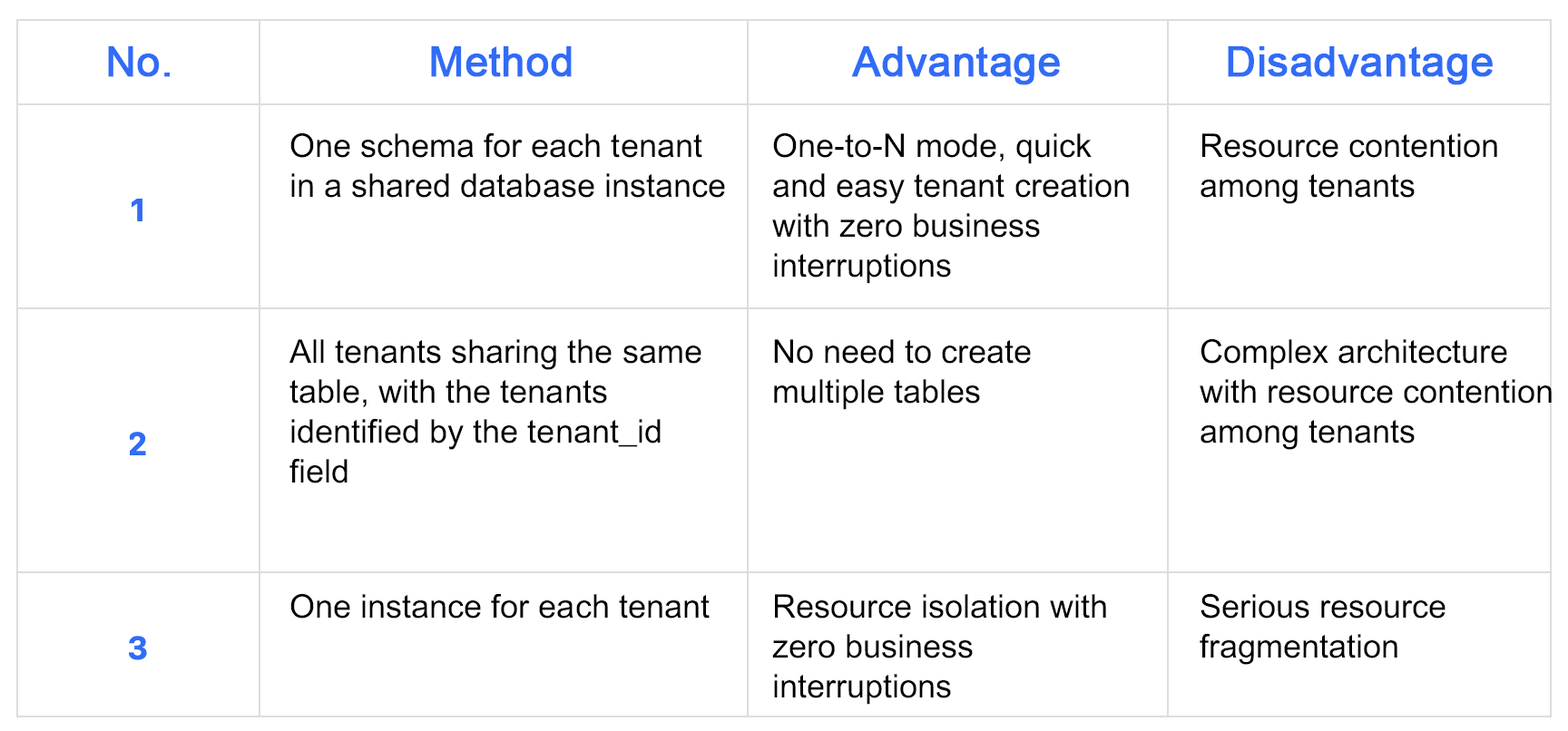
<style>
.page{position:relative;width:1568px;height:731px;background:#ffffff}
.page>*{position:absolute;margin:0}
.t1{font:41.7px "ArialMT";color:#306cf6;font-weight:bold}
.t2{font:32.7px/39.9px "ArialMT";color:#000000}
.t3{font:32.7px "ArialMT";color:#000000}
</style>
<div class="page">
<p class="t1" style="left:108px;top:46px;width:62px;height:31px">No.</p>
<p class="t1" style="left:431px;top:46px;width:141px;height:31px">Method</p>
<p class="t1" style="left:851px;top:46px;width:209px;height:39px">Advantage</p>
<p class="t1" style="left:1228px;top:46px;width:265px;height:39px">Disadvantage</p>
<p class="t2" style="left:290px;top:132px;width:435px;height:66px">One schema for each tenant in a shared database instance</p>
<p class="t2" style="left:772px;top:132px;width:357px;height:152px">One-to-N mode, quick and easy tenant creation with zero business interruptions</p>
<p class="t2" style="left:1200px;top:133px;width:297px;height:71px">Resource contention among tenants</p>
<p class="t2" style="left:289px;top:339px;width:412px;height:145px">All tenants sharing the same table, with the tenants identified by the tenant_id field</p>
<p class="t2" style="left:774px;top:339px;width:257px;height:71px">No need to create multiple tables</p>
<p class="t2" style="left:1200px;top:338px;width:352px;height:112px">Complex architecture with resource contention among tenants</p>
<p class="t3" style="left:290px;top:593px;width:420px;height:26px">One instance for each tenant</p>
<p class="t2" style="left:1200px;top:593px;width:246px;height:72px">Serious resource fragmentation</p>
<p class="t2" style="left:772px;top:594px;width:334px;height:111px">Resource isolation with zero business interruptions</p>
</div>
